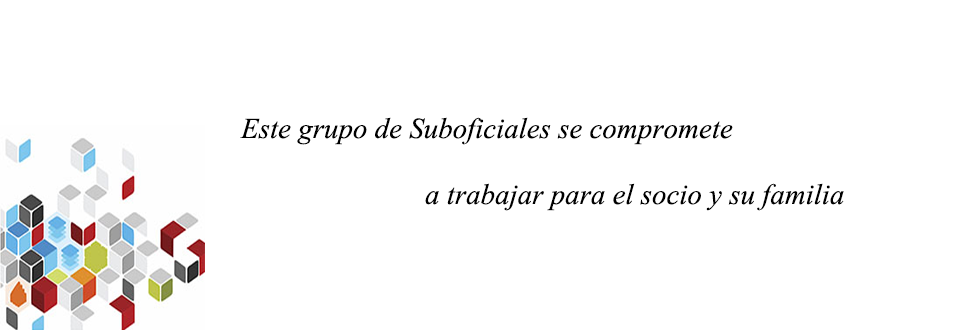
<style>
.page{position:relative;width:967px;height:330px;background:#ffffff}
.page>*{position:absolute;margin:0}
.t1{font:36px "Vijaya";color:#000000}
</style>
<div class="page">
<p class="t1" style="left:240px;top:117px;width:493px;height:28px">Este grupo de Suboficiales se compromete</p>
<p class="t1" style="left:425px;top:183px;width:419px;height:28px">a trabajar para el socio y su familia</p>
</div>
